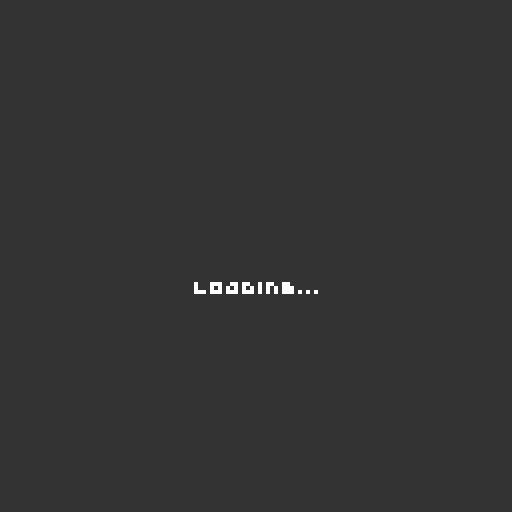
<style>
.page{position:relative;width:512px;height:512px;background:#333333}
.page>*{position:absolute;margin:0}
.t1{font:16px "Marvelous-3x3";color:#ffffff}
</style>
<div class="page">
<p class="t1" style="left:194px;top:282px;width:124px;height:12px">loading...</p>
</div>
